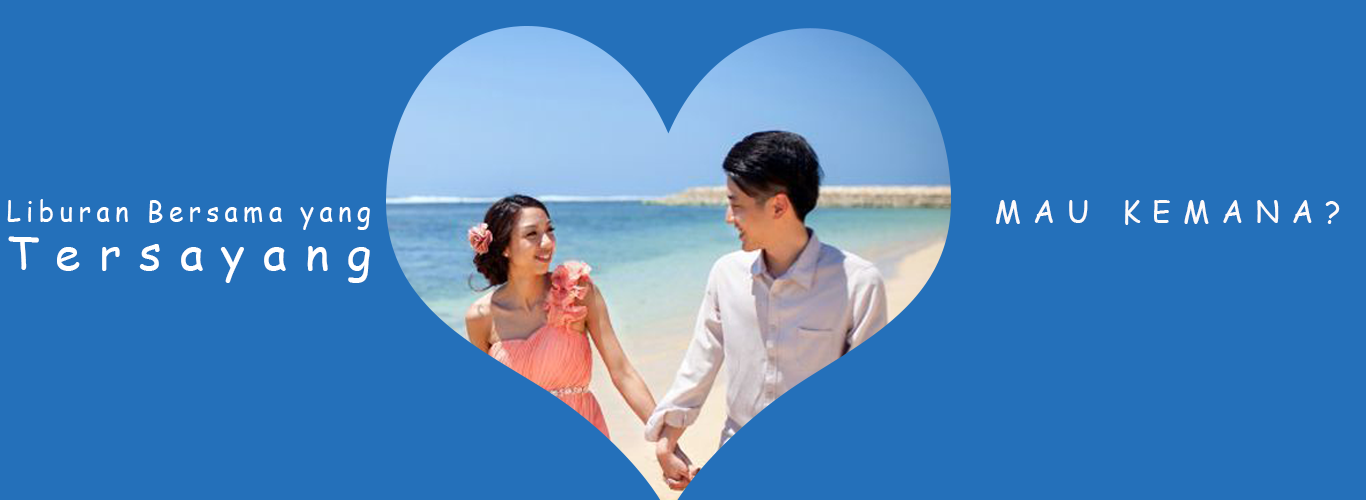
<style>
.page{position:relative;width:1366px;height:500px;background:#2470ba}
.page>*{position:absolute;margin:0}
.t1{font:28.8px "ComicSansMS";letter-spacing:0.2em;color:#ffffff;scale:0.91 1}
.t2{font:30px "ComicSansMS";letter-spacing:0.4em;color:#fcfafa}
.t3{font:45.7px "ComicSansMS";letter-spacing:0.4em;color:#ffffff}
</style>
<div class="page">
<p class="t1" style="left:7px;top:199px;width:363px;height:31px">Liburan Bersama yang</p>
<p class="t2" style="left:996px;top:200px;width:344px;height:25px">MAU KEMANA?</p>
<p class="t3" style="left:8px;top:236px;width:362px;height:47px">Tersayang</p>
</div>
